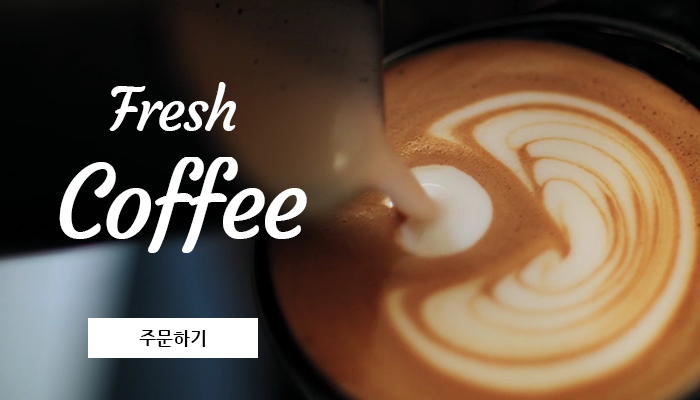
<style>
.page{position:relative;width:700px;height:400px}
.page>*{position:absolute;margin:0}
.t1{font:60px "Courgette-Regular";letter-spacing:-0.05em;color:#ffffff}
.t2{font:100px "Courgette-Regular";letter-spacing:-0.05em;color:#ffffff}
.t3{font:18px "NanumGothicBold";color:#000000}
</style>
<div class="page">
<p class="t1" style="left:109px;top:82px;width:127px;height:49px">Fresh</p>
<p class="t2" style="left:59px;top:157px;width:248px;height:96px">Coffee</p>
<p class="t3" style="left:139px;top:330px;width:66px;height:17px">주문하기</p>
</div>
